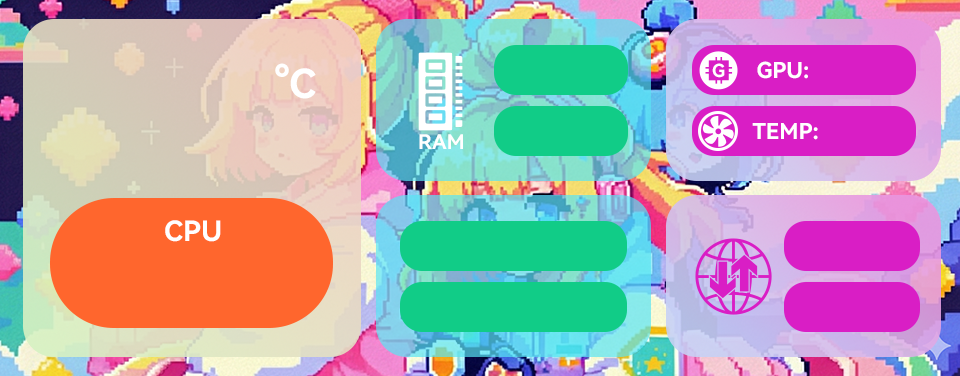
<style>
.page{position:relative;width:960px;height:376px}
.page>*{position:absolute;margin:0}
.t1{font:40px "HarmonyOS_Sans_SC_Bold";color:#ffffff}
.t2{font:18px "HarmonyOS_Sans_SC_Bold";color:#ffffff}
.t3{font:22px "HarmonyOS_Sans_SC_Bold";color:#ffffff}
.t4{font:20.3px "HarmonyOS_Sans_SC_Bold";color:#ffffff}
.t5{font:28px "HarmonyOS_Sans_SC_Bold";color:#ffffff}
</style>
<div class="page">
<p class="t1" style="left:275px;top:63px;width:41px;height:36px">°C</p>
<p class="t2" style="left:712px;top:63px;width:13px;height:15px">G</p>
<p class="t3" style="left:757px;top:61px;width:51px;height:18px">GPU:</p>
<p class="t3" style="left:752px;top:123px;width:66px;height:17px">TEMP:</p>
<p class="t4" style="left:419px;top:134px;width:44px;height:15px">RAM</p>
<p class="t5" style="left:165px;top:220px;width:56px;height:22px">CPU</p>
</div>
